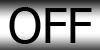
<style>
.page{position:relative;width:100px;height:50px;background:#ffffff}
.page>*{position:absolute;margin:0}
.t1{font:48px "Tahoma";color:#010101}
</style>
<div class="page">
<p class="t1" style="left:9px;top:7px;width:83px;height:37px">OFF</p>
</div>
